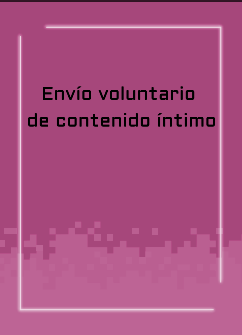
<style>
.page{position:relative;width:242px;height:335px;background:#a6477b}
.page>*{position:absolute;margin:0}
.t1{font:18.3px/26.7px "Aldrich-Regular";letter-spacing:0.015em;color:#000000}
</style>
<div class="page">
<p class="t1" style="left:28px;top:86px;width:187px;height:41px;text-align:center">Envío voluntario <br>de contenido íntimo</p>
</div>
